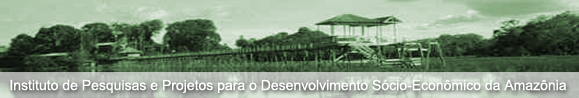
<style>
.page{position:relative;width:579px;height:98px}
.page>*{position:absolute;margin:0}
.t1{font:14px "ArialMT";color:#ffffff}
</style>
<div class="page">
<p class="t1" style="left:10px;top:79px;width:557px;height:14px">Instituto de Pesquisas e Projetos para o Desenvolvimento Sócio-Econômico da Amazônia</p>
</div>
